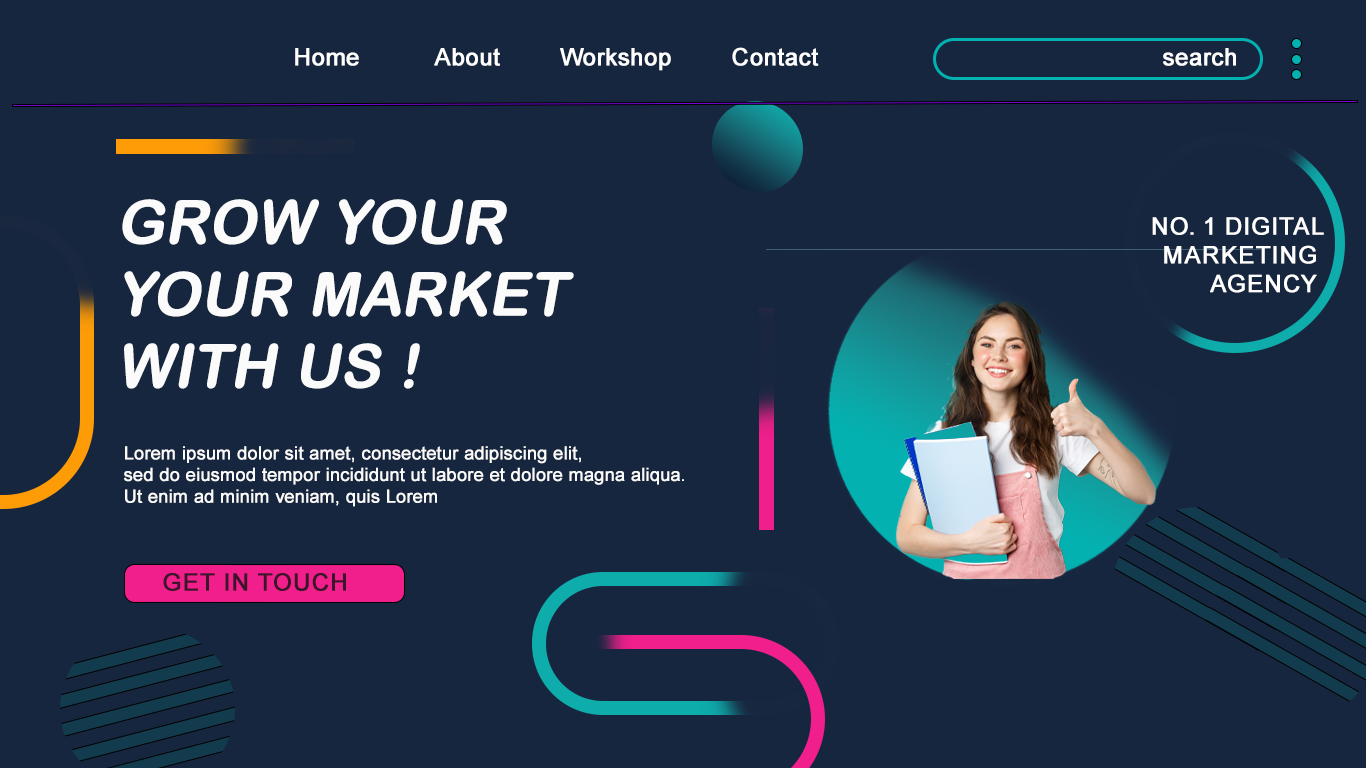
<style>
.page{position:relative;width:1366px;height:768px;background:#17263f}
.page>*{position:absolute;margin:0}
.t1{font:24px "ArialMT";letter-spacing:0.005em;color:#ffffff;font-weight:bold}
.t2{font:60px "ArialRoundedMTBold";color:#fbfbfb;text-transform:uppercase;font-weight:bold;font-style:italic}
.t3{font:24px "ArialMT";color:#ffffff;text-transform:uppercase;font-weight:bold}
.t4{font:18px "ArialMT";color:#fbfbfb;font-weight:bold}
.t5{font:24px "ArialMT";color:#3b1529;text-transform:uppercase;font-weight:bold}
.t6{font:18px "ArialMT";color:#f01f8b;font-weight:bold}
</style>
<div class="page">
<p class="t1" style="left:295px;top:47px;width:524px;height:24px">Home          About        Workshop        Contact</p>
<p class="t1" style="left:1163px;top:48px;width:73px;height:18px">search</p>
<p class="t2" style="left:122px;top:199px;width:452px;height:190px">GRow YouR<br>Your Market<br>With US !</p>
<p class="t3" style="left:1152px;top:217px;width:172px;height:76px;text-align:right">No. 1 Digital<br>Marketing <br>Agency</p>
<p class="t4" style="left:124px;top:446px;width:560px;height:61px">Lorem ipsum dolor sit amet, consectetur adipiscing elit,<br>sed do eiusmod tempor incididunt ut labore et dolore magna aliqua.<br>Ut enim ad minim veniam, quis Lorem</p>
<p class="t5" style="left:163px;top:573px;width:183px;height:18px"><span class="t6">        </span>Get In Touch</p>
</div>
